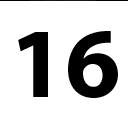
<style>
.page{position:relative;width:128px;height:128px;background:#ffffff}
.page>*{position:absolute;margin:0}
.t1{font:99.7px "MyriadHebrew-Bold";color:#000000}
</style>
<div class="page">
<p class="t1" style="left:18px;top:30px;width:100px;height:67px">16</p>
</div>
